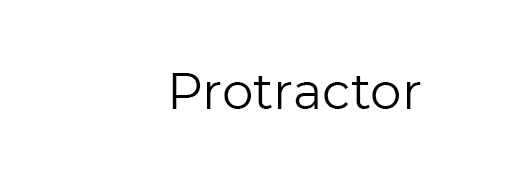
<style>
.page{position:relative;width:525px;height:180px;background:#ffffff}
.page>*{position:absolute;margin:0}
.t1{font:50px "Montserrat-Regular";color:#000000}
</style>
<div class="page">
<p class="t1" style="left:172px;top:73px;width:249px;height:36px">Protractor</p>
</div>
